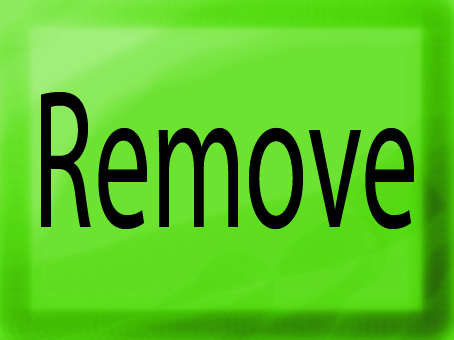
<style>
.page{position:relative;width:454px;height:340px}
.page>*{position:absolute;margin:0}
.t1{font:199.5px "MyriadPro-Regular";color:#000000;scale:0.57 1}
</style>
<div class="page">
<p class="t1" style="left:41px;top:92px;width:373px;height:138px">Remove</p>
</div>
